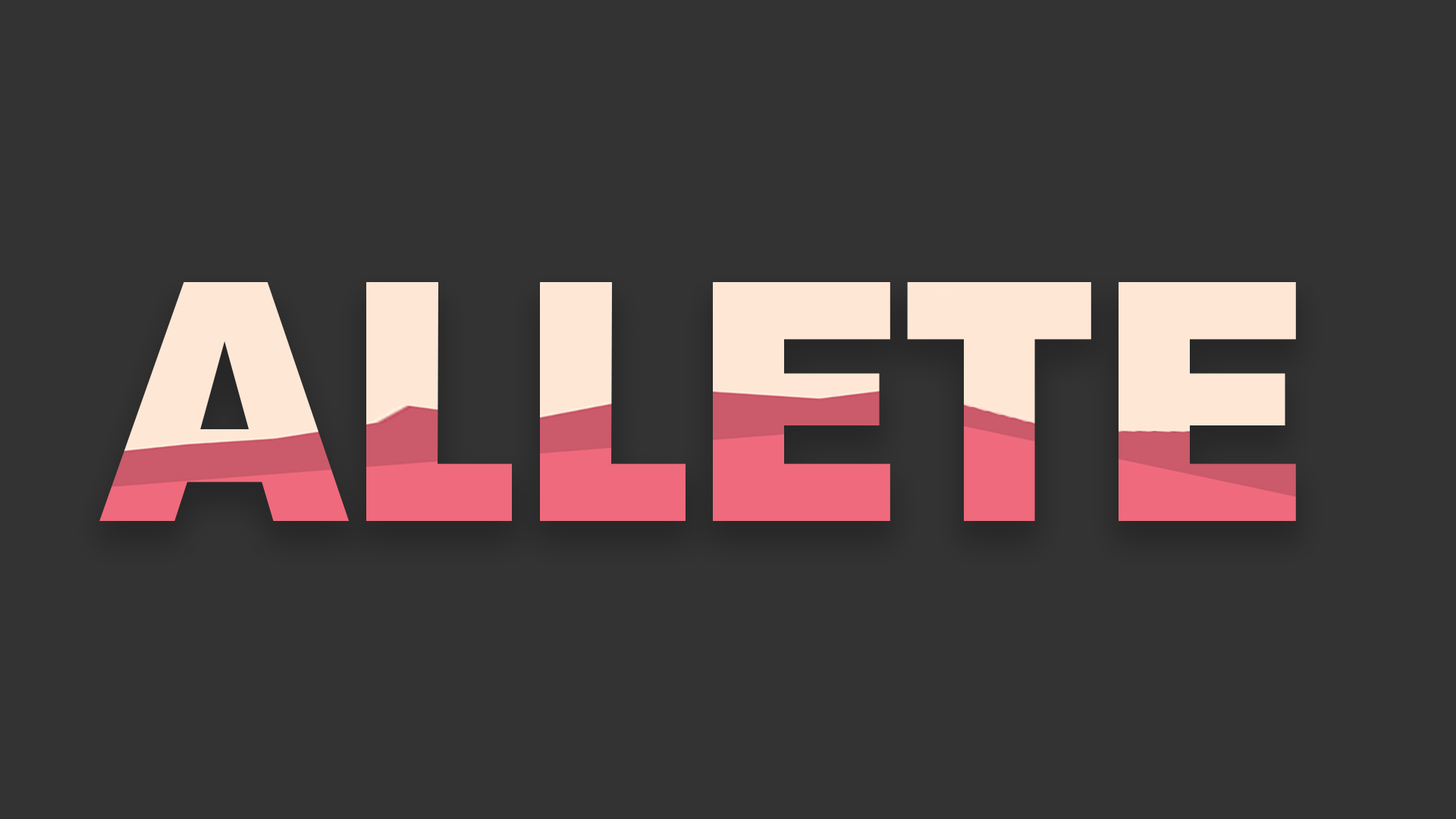
<style>
.page{position:relative;width:1456px;height:819px;background:#333333}
.page>*{position:absolute;margin:0}
.t1{font:373.2px "Paralucent-Heavy"}
</style>
<div class="page">
<p class="t1" style="left:99px;top:282px;width:1197px;height:239px">ALLETE</p>
</div>
